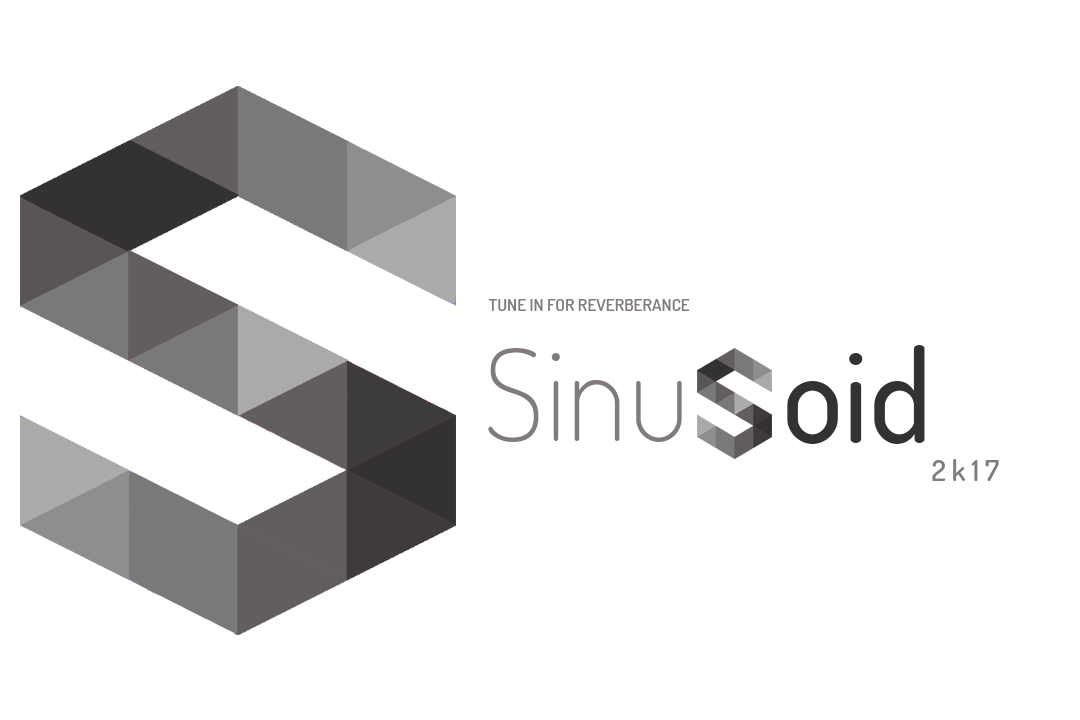
<style>
.page{position:relative;width:1080px;height:720px;background:#ffffff}
.page>*{position:absolute;margin:0}
.t1{font:17px "Dosis-SemiBold";color:#817b7b}
.t2{font:128px "Dosis-ExtraLight";color:#817b7b}
.t3{font:128px "Dosis-Medium";color:#343131}
.t4{font:29px "Dosis-SemiBold";color:#817b7b}
</style>
<div class="page">
<p class="t1" style="left:488px;top:299px;width:202px;height:12px">TUNE IN FOR REVERBERANCE</p>
<p class="t2" style="left:488px;top:348px;width:194px;height:94px">Sinu</p>
<p class="t3" style="left:787px;top:345px;width:138px;height:99px">oid</p>
<p class="t4" style="left:932px;top:459px;width:67px;height:22px">2 k 1 7</p>
</div>
